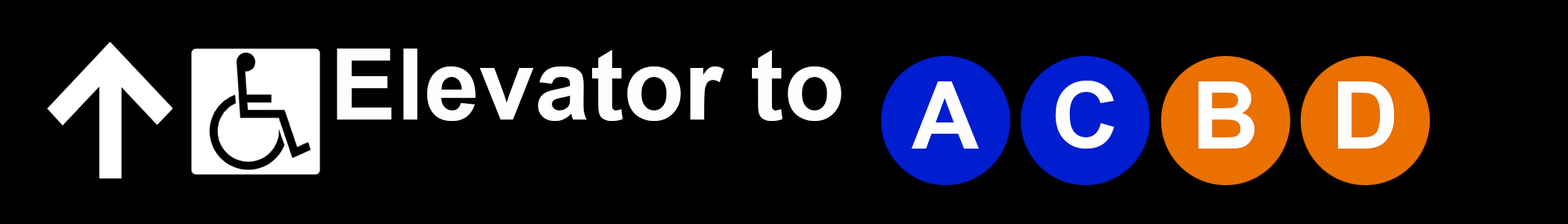
<style>
.page{position:relative;width:1568px;height:224px;background:#000000}
.page>*{position:absolute;margin:0}
.t1{font:99.6px "Arial-BoldMT";color:#fefefe}
.t2{font:93.3px "Arial-BoldMT";color:#fefefe}
</style>
<div class="page">
<p class="t1" style="left:337px;top:49px;width:504px;height:72px">Elevator to</p>
<p class="t2" style="left:911px;top:81px;width:68px;height:68px">A</p>
<p class="t2" style="left:1055px;top:81px;width:59px;height:68px">C</p>
<p class="t2" style="left:1198px;top:81px;width:57px;height:68px">B</p>
<p class="t2" style="left:1338px;top:81px;width:57px;height:68px">D</p>
</div>
